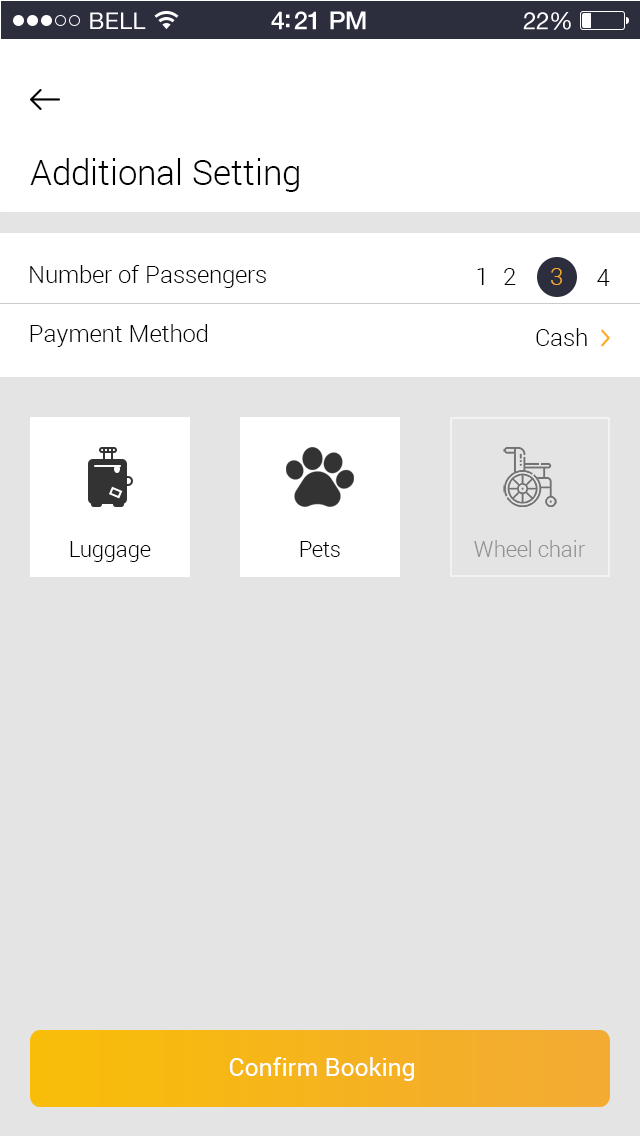
<style>
.page{position:relative;width:640px;height:1136px;background:#e4e4e4}
.page>*{position:absolute;margin:0}
.t1{font:35px "Roboto-Light";color:#000000}
.t2{font:24px "Roboto-Light";color:#000000}
.t3{font:24px "Roboto-Light";color:#faad2d}
.t4{font:22px "Roboto-Light";color:#000000}
.t5{font:22px "Roboto-Light";color:#919191}
.t6{font:25px "Roboto-Regular";color:#ffffff}
</style>
<div class="page">
<p class="t1" style="left:30px;top:158px;width:269px;height:34px">Additional Setting</p>
<p class="t2" style="left:30px;top:265px;width:236px;height:23px">Number of Passengers</p>
<p class="t2" style="left:477px;top:268px;width:7px;height:17px">1</p>
<p class="t2" style="left:504px;top:268px;width:12px;height:17px">2</p>
<p class="t3" style="left:551px;top:268px;width:11px;height:17px">3</p>
<p class="t2" style="left:597px;top:269px;width:13px;height:17px">4</p>
<p class="t2" style="left:30px;top:324px;width:178px;height:23px">Payment Method</p>
<p class="t2" style="left:536px;top:328px;width:51px;height:18px">Cash</p>
<p class="t4" style="left:70px;top:541px;width:81px;height:21px">Luggage</p>
<p class="t4" style="left:300px;top:541px;width:40px;height:16px">Pets</p>
<p class="t5" style="left:474px;top:540px;width:111px;height:17px">Wheel chair</p>
<p class="t6" style="left:229px;top:1057px;width:185px;height:24px">Confirm Booking</p>
</div>
